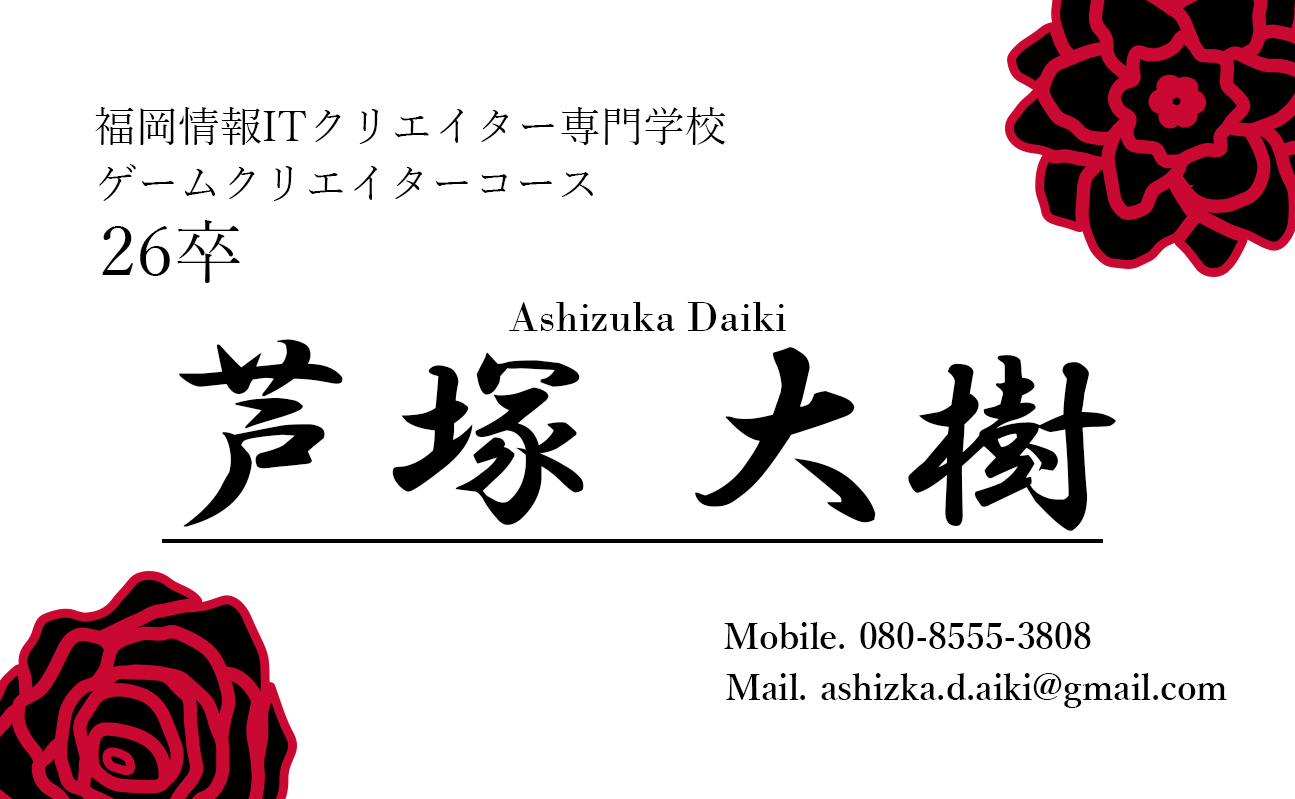
<style>
.page{position:relative;width:1295px;height:799px;background:#ffffff}
.page>*{position:absolute;margin:0}
.t1{font:42px "YuMincho-Regular";color:#000000}
.t2{font:69px "YuMincho-Regular";color:#000000}
.t3{font:43px "BodoniMT";color:#000000}
.t4{font:224px "HGSGyoshotai";color:#000000}
.t5{font:36px "YuMincho-Demibold";color:#000000}
</style>
<div class="page">
<p class="t1" style="left:95px;top:107px;width:631px;height:38px">福岡情報ITクリエイター専門学校</p>
<p class="t1" style="left:99px;top:164px;width:494px;height:37px">ゲームクリエイターコース</p>
<p class="t2" style="left:102px;top:220px;width:138px;height:63px">26卒</p>
<p class="t3" style="left:509px;top:302px;width:277px;height:29px">Ashizuka Daiki</p>
<p class="t4" style="left:179px;top:339px;width:937px;height:192px">芦塚 大樹</p>
<p class="t5" style="left:724px;top:622px;width:367px;height:27px">Mobile. 080-8555-3808</p>
<p class="t5" style="left:726px;top:673px;width:501px;height:35px">Mail. ashizka.d.aiki@gmail.com</p>
</div>
